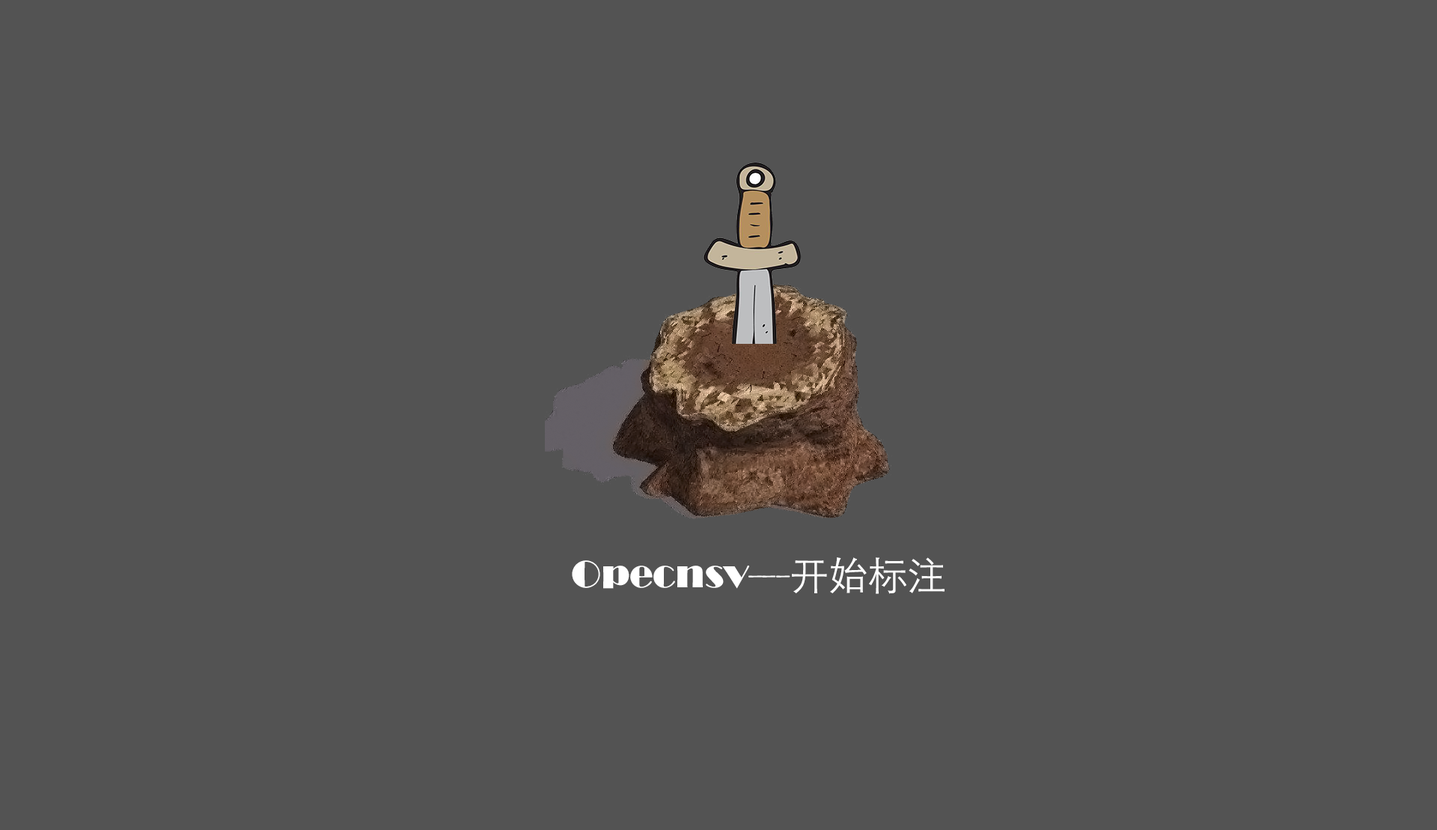
<style>
.page{position:relative;width:1437px;height:830px;background:#535353}
.page>*{position:absolute;margin:0}
.t1{font:67.4px "Broadway";color:#ffffff}
.t2{font:67.4px "STXihei";color:#ffffff}
</style>
<div class="page">
<p class="t1" style="left:572px;top:557px;width:373px;height:37px">Opecnsv---<span class="t2">开始标注</span></p>
</div>
